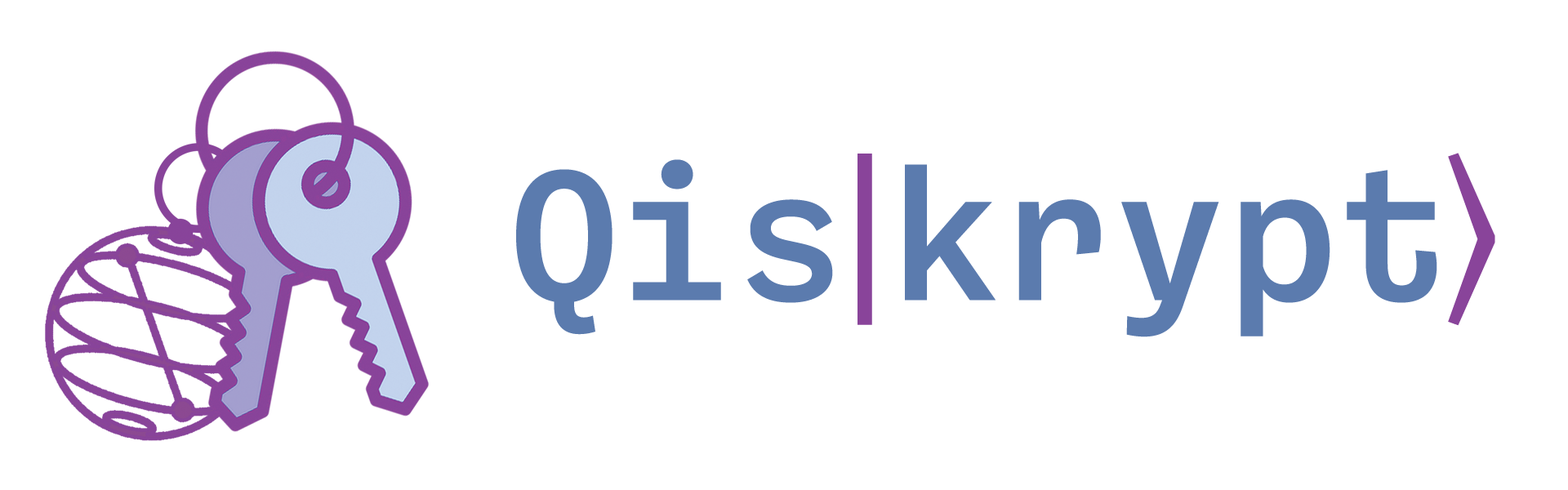
<style>
.page{position:relative;width:1568px;height:490px;background:#ffffff}
.page>*{position:absolute;margin:0}
.t1{font:188.2px "BallingerMono-Medium";color:#5b7bae}
.t2{font:188.2px "Cambria";color:#89449a}
</style>
<div class="page">
<p class="t1" style="left:516px;top:159px;width:921px;height:178px">Qis krypt</p>
<p class="t2" style="left:858px;top:154px;width:14px;height:171px">|</p>
<p class="t2" style="left:1448px;top:153px;width:47px;height:173px">⟩</p>
</div>
